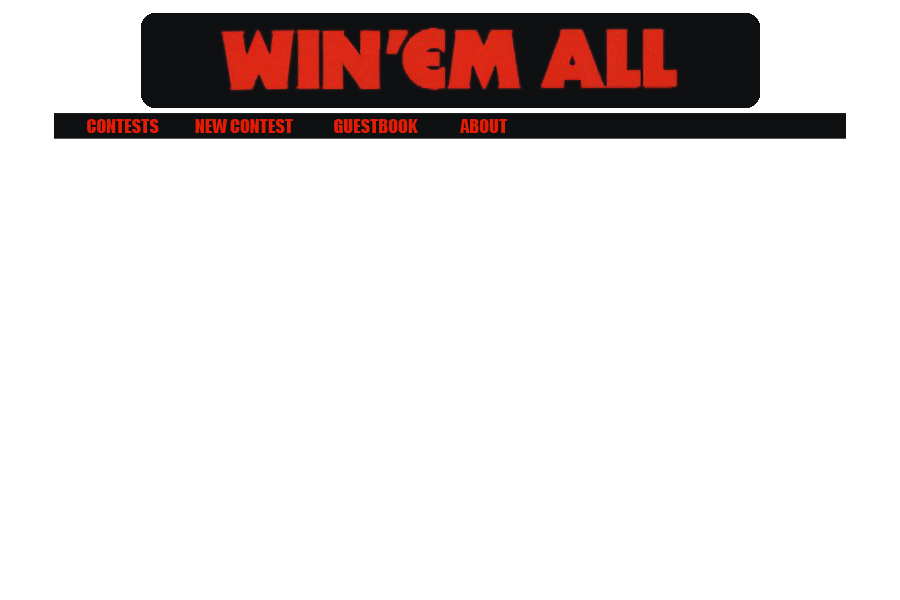
<style>
.page{position:relative;width:900px;height:600px;background:#ffffff}
.page>*{position:absolute;margin:0}
.t1{font:18px "Impact";color:#e41c06}
</style>
<div class="page">
<p class="t1" style="left:87px;top:119px;width:72px;height:14px">CONTESTS</p>
<p class="t1" style="left:195px;top:119px;width:98px;height:14px">NEW CONTEST</p>
<p class="t1" style="left:334px;top:119px;width:84px;height:14px">GUESTBOOK</p>
<p class="t1" style="left:460px;top:119px;width:48px;height:14px">ABOUT</p>
</div>
